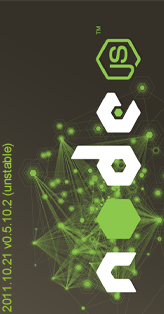
<style>
.page{position:relative;width:164px;height:314px;background:#353129}
.page>*{position:absolute;margin:0}
.t1{font:12px "ArialMT";color:#99cc33}
</style>
<div class="page">
<p class="t1" style="left:2px;top:143px;width:12px;height:169px;rotate:-90deg">2011.10.21 v0.5.10.2 (unstable)</p>
</div>
